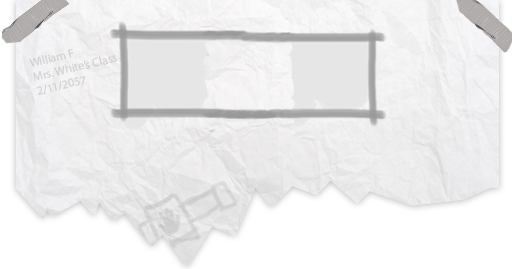
<style>
.page{position:relative;width:512px;height:269px;background:#ffffff}
.page>*{position:absolute;margin:0}
.t1{font:12px "MyriadPro-Regular";color:#d5d3d5}
</style>
<div class="page">
<p class="t1" style="left:29px;top:48px;width:88px;height:47px;rotate:-14deg">William F<br>Mrs. White’s Class<br>2/11/2057</p>
</div>
